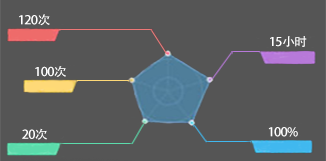
<style>
.page{position:relative;width:326px;height:161px;background:#555555}
.page>*{position:absolute;margin:0}
.t1{font:12px "AdobeHeitiStd-Regular";letter-spacing:-0.05em;color:#ffffff;scale:1.07 1}
</style>
<div class="page">
<p class="t1" style="left:19px;top:14px;width:31px;height:12px">120次</p>
<p class="t1" style="left:270px;top:36px;width:37px;height:11px">15小时</p>
<p class="t1" style="left:35px;top:66px;width:31px;height:11px">100次</p>
<p class="t1" style="left:22px;top:128px;width:25px;height:12px">20次</p>
<p class="t1" style="left:268px;top:127px;width:30px;height:10px">100%</p>
</div>
